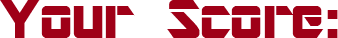
<style>
.page{position:relative;width:338px;height:38px;background:#ffffff}
.page>*{position:absolute;margin:0}
.t1{font:60px "ARDESTINE";color:#9f0017}
</style>
<div class="page">
<p class="t1" style="left:0px;top:0px;width:338px;height:38px">Your Score:</p>
</div>
